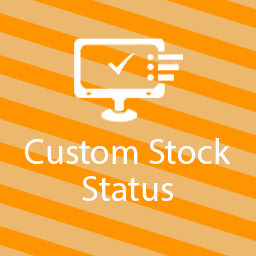
<style>
.page{position:relative;width:256px;height:256px;background:#ecb86d}
.page>*{position:absolute;margin:0}
.t1{font:36px "MyriadPro-Regular";color:#ffffff}
</style>
<div class="page">
<p class="t1" style="left:25px;top:138px;width:206px;height:26px">Custom Stock</p>
<p class="t1" style="left:82px;top:176px;width:91px;height:25px">Status</p>
</div>
